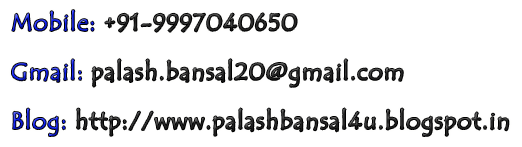
<style>
.page{position:relative;width:522px;height:147px;background:#ffffff}
.page>*{position:absolute;margin:0}
.t1{font:41px "TempusSansITC";letter-spacing:0.05em;color:#282828}
.t2{font:41px "TempusSansITC";letter-spacing:0.05em;color:#0f1ff3}
</style>
<div class="page">
<p class="t1" style="left:12px;top:10px;width:497px;height:126px"><span class="t2">Mobile:</span> +91-9997040650<br><span class="t2">Gmail:</span> palash.bansal20@gmail.com<br><span class="t2">Blog:</span> http://www.palashbansal4u.blogspot.in</p>
</div>
